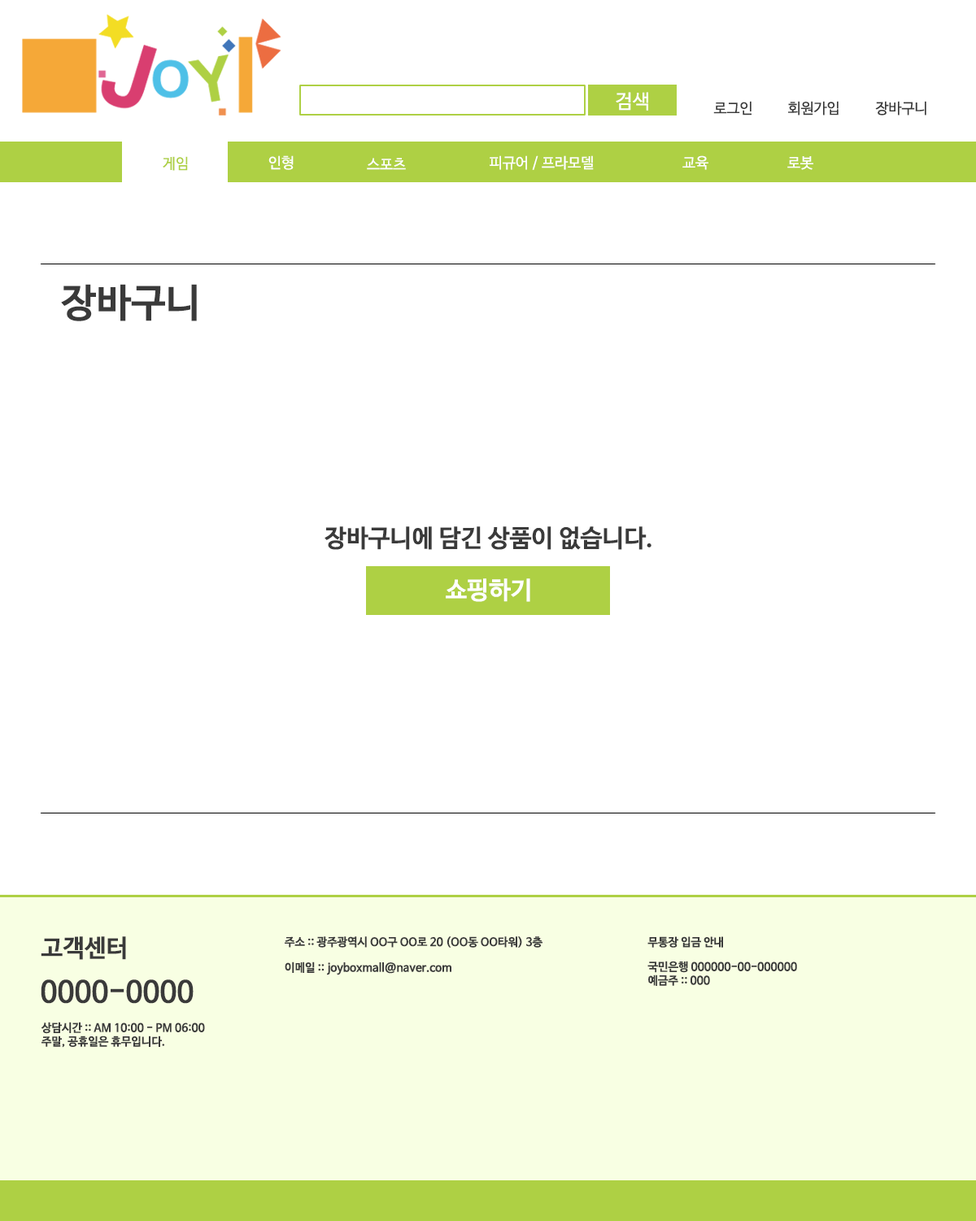
<style>
.page{position:relative;width:976px;height:1221px;background:#ffffff}
.page>*{position:absolute;margin:0}
.t1{font:19.5px "NanumBarunGothic";color:#ffffff}
.t2{font:14.6px "NanumBarunGothic";color:#3a3a3a}
.t3{font:14.6px "NanumBarunGothic";color:#aed044}
.t4{font:14.6px "NanumBarunGothic";color:#ffffff}
.t5{font:39.1px "NanumBarunGothicBold";color:#3a3a3a}
.t6{font:24.4px "NanumBarunGothicBold";color:#3a3a3a}
.t7{font:24.4px "NanumBarunGothicBold";color:#ffffff}
.t8{font:11.4px "NanumBarunGothicBold";color:#3a3a3a}
.t9{font:29.3px "NanumBarunGothicBold";color:#3a3a3a}
</style>
<div class="page">
<p class="t1" style="left:616px;top:92px;width:32px;height:19px">검색</p>
<p class="t2" style="left:714px;top:101px;width:38px;height:15px">로그인</p>
<p class="t2" style="left:788px;top:101px;width:51px;height:15px">회원가입</p>
<p class="t2" style="left:875px;top:101px;width:52px;height:15px">장바구니</p>
<p class="t3" style="left:163px;top:156px;width:25px;height:15px">게임</p>
<p class="t4" style="left:269px;top:155px;width:25px;height:15px">인형</p>
<p class="t4" style="left:367px;top:158px;width:39px;height:12px">스포츠</p>
<p class="t4" style="left:490px;top:155px;width:104px;height:15px">피규어 / 프라모델</p>
<p class="t4" style="left:683px;top:155px;width:26px;height:15px">교육</p>
<p class="t4" style="left:788px;top:156px;width:26px;height:14px">로봇</p>
<p class="t5" style="left:61px;top:284px;width:136px;height:37px">장바구니</p>
<p class="t6" style="left:325px;top:526px;width:327px;height:24px">장바구니에 담긴 상품이 없습니다.</p>
<p class="t7" style="left:446px;top:579px;width:84px;height:23px">쇼핑하기</p>
<p class="t6" style="left:41px;top:937px;width:85px;height:23px">고객센터</p>
<p class="t8" style="left:285px;top:937px;width:258px;height:11px">주소 :: 광주광역시 OO구 OO로 20 (OO동 OO타워) 3층</p>
<p class="t8" style="left:648px;top:937px;width:75px;height:11px">무통장 입금 안내</p>
<p class="t8" style="left:285px;top:962px;width:167px;height:14px">이메일 :: joyboxmall@naver.com</p>
<p class="t8" style="left:648px;top:961px;width:149px;height:25px">국민은행 000000-00-000000<br>예금주 :: 000</p>
<p class="t9" style="left:41px;top:980px;width:153px;height:24px">0000-0000</p>
<p class="t8" style="left:41px;top:1022px;width:164px;height:26px">상담시간 :: AM 10:00 - PM 06:00<br>주말, 공휴일은 휴무입니다.</p>
</div>
